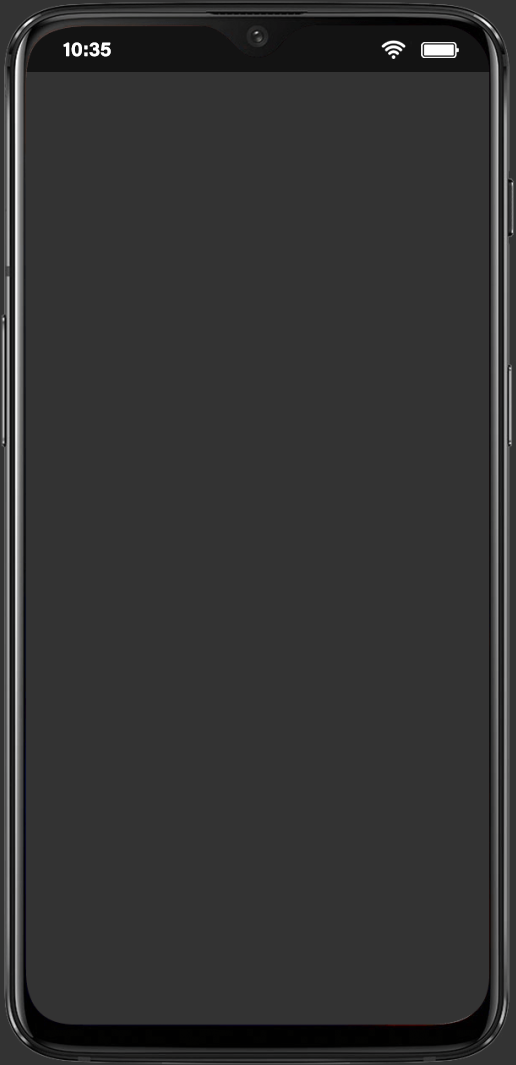
<style>
.page{position:relative;width:516px;height:1065px;background:#333333}
.page>*{position:absolute;margin:0}
.t1{font:20px "AcuminConcept_700.000wght_99.000wdth";color:#ffffff}
</style>
<div class="page">
<p class="t1" style="left:63px;top:42px;width:48px;height:15px">10:35</p>
</div>
